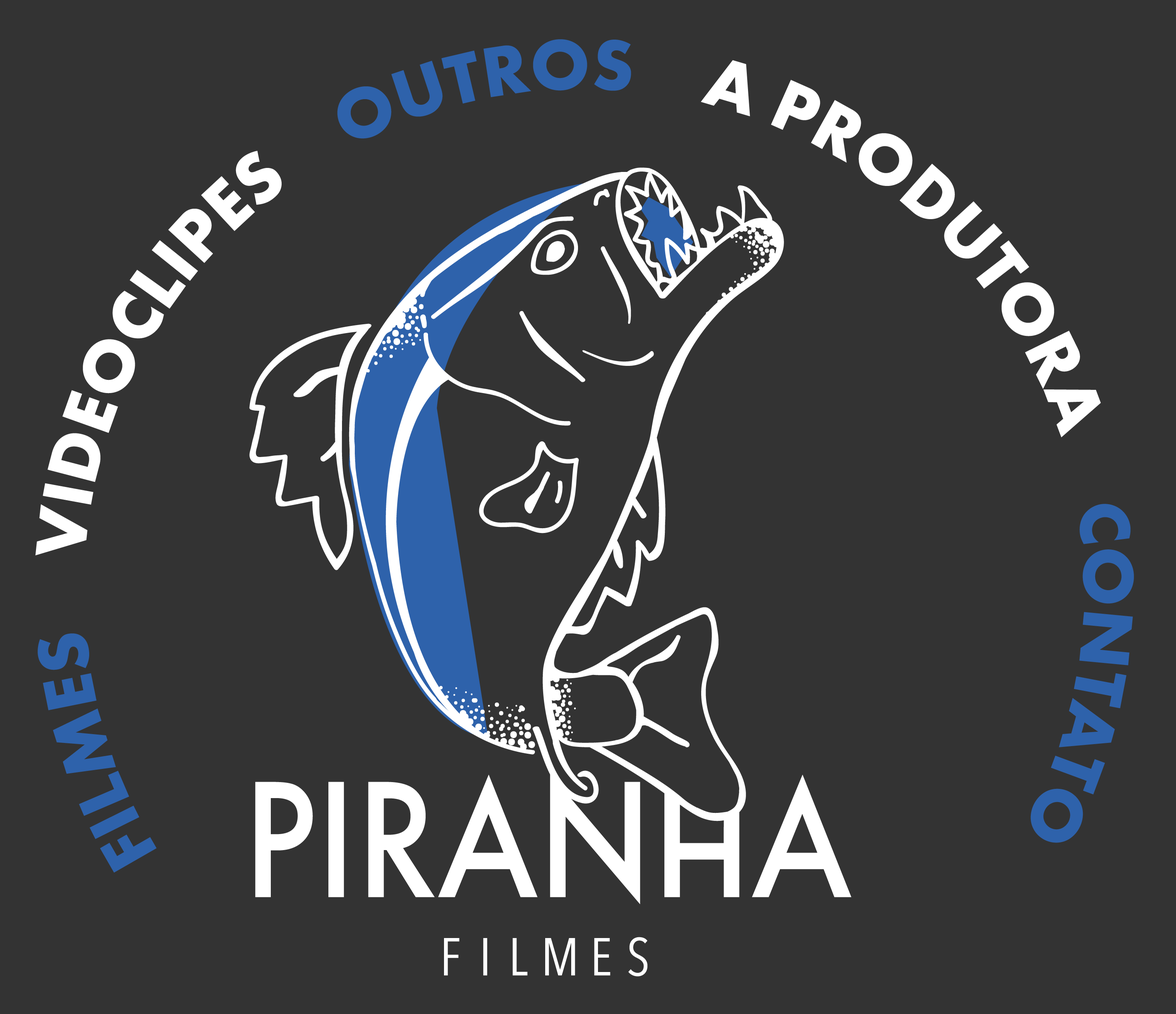
<style>
.page{position:relative;width:1176px;height:1014px;background:#333333}
.page>*{position:absolute;margin:0}
.t1{font:73.3px/51.7px "FuturaPT-Bold";color:#ffffff}
.t2{font:73.3px/51.7px "FuturaPT-Bold";color:#2e62ab}
</style>
<div class="page">
<p class="t1" style="left:35px;top:39px;width:1099px;height:834px"><span class="t2"> FILMES    </span>VIDEOCLIPES<span class="t2">    OUTROS    </span>A PRODUTORA<span class="t2">    CONTATO</span></p>
</div>
